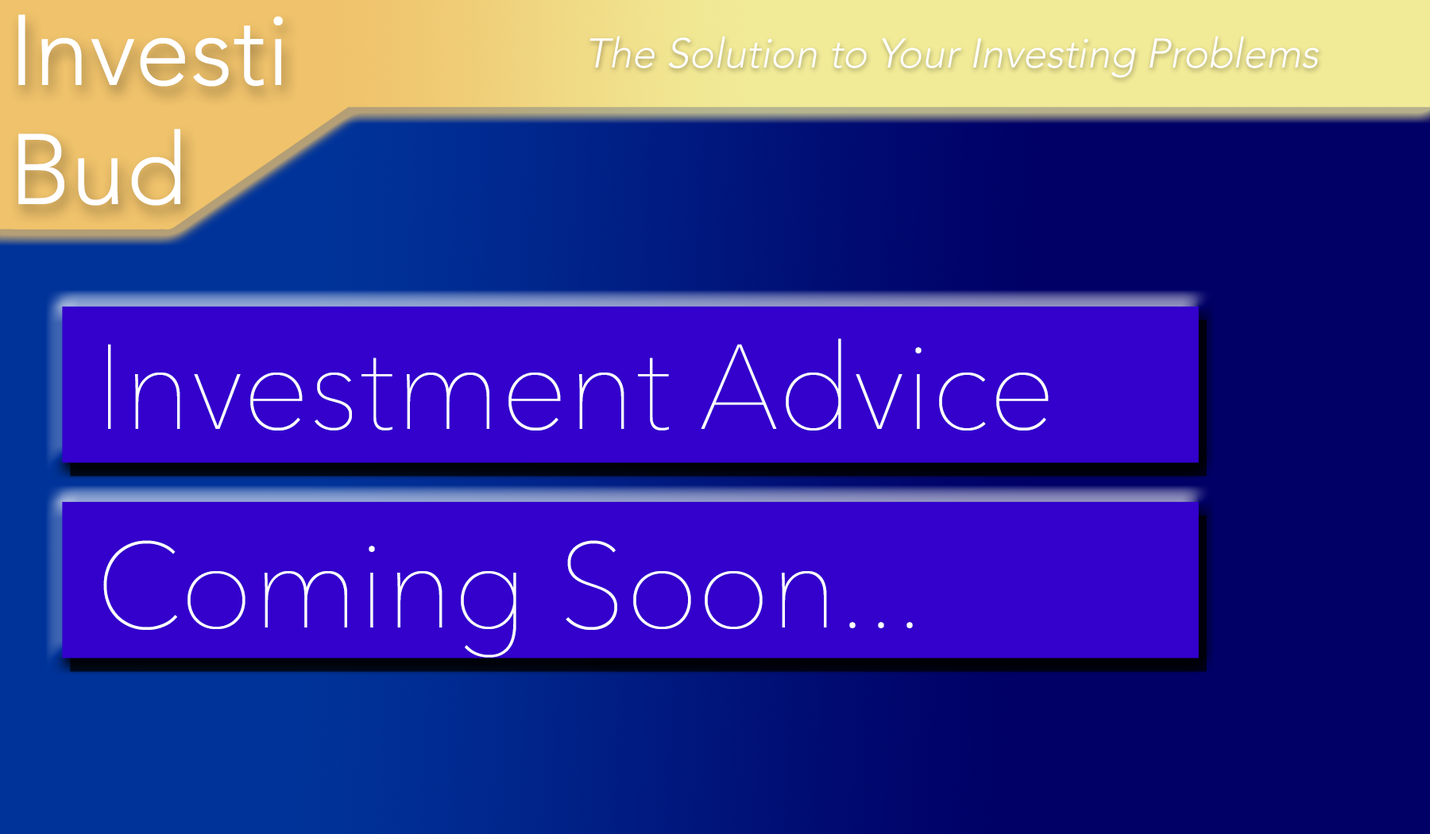
<style>
.page{position:relative;width:1430px;height:834px;background:#3300cc}
.page>*{position:absolute;margin:0}
.t1{font:99.3px "Avenir-Light";color:#ffffff}
.t2{font:41.4px "Avenir-Light";color:#ffffff;font-style:italic}
.t3{font:119.1px "AvenirNext-UltraLight";color:#ffffff}
</style>
<div class="page">
<p class="t1" style="left:18px;top:14px;width:265px;height:192px">Investi<br>Bud</p>
<p class="t2" style="left:589px;top:36px;width:730px;height:42px">The Solution to Your Investing Problems</p>
<p class="t3" style="left:108px;top:338px;width:940px;height:93px">Investment Advice</p>
<p class="t3" style="left:103px;top:540px;width:810px;height:118px">Coming Soon...</p>
</div>
